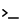
<style>
.page{position:relative;width:20px;height:20px;background:#ffffff}
.page>*{position:absolute;margin:0}
.t1{font:16px "Chalkboard";color:#000000}
</style>
<div class="page">
<p class="t1" style="left:2px;top:9px;width:17px;height:10px">&gt;_</p>
</div>
